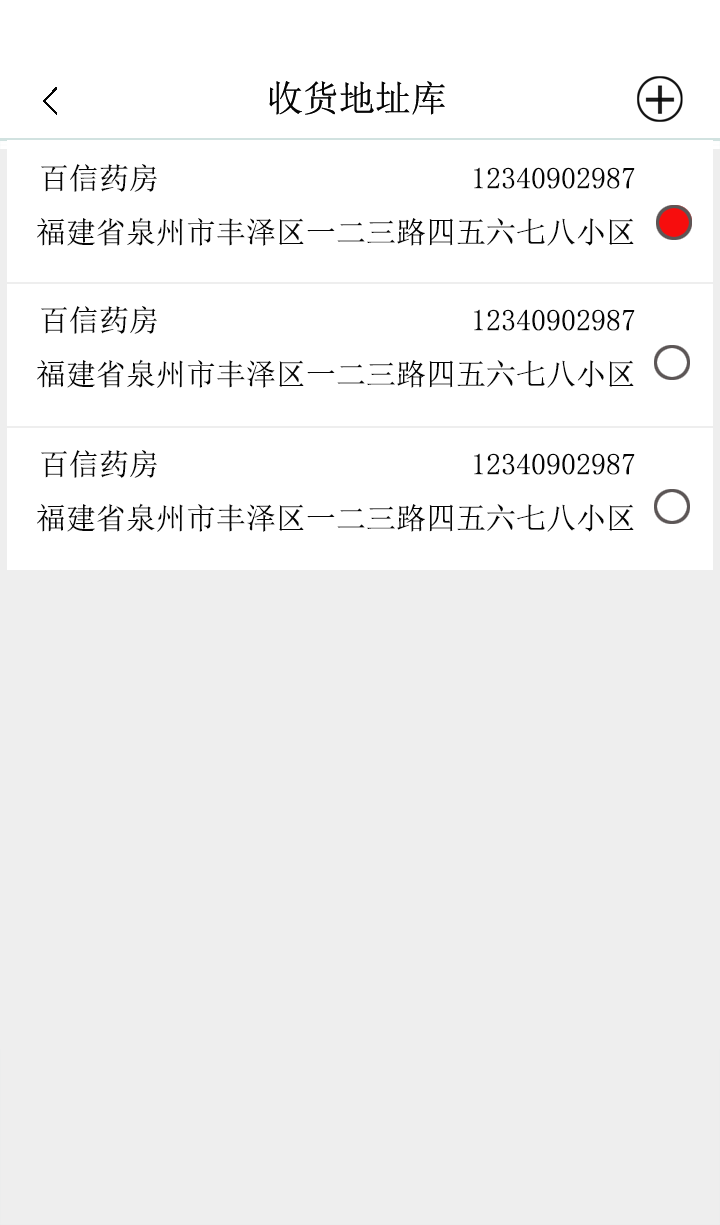
<style>
.page{position:relative;width:720px;height:1225px;background:#eeeeee}
.page>*{position:absolute;margin:0}
.t1{font:36px "SimSun";color:#060606}
.t2{font:30px "SimSun";color:#060606}
</style>
<div class="page">
<p class="t1" style="left:269px;top:81px;width:176px;height:34px">收货地址库</p>
<p class="t1" style="left:269px;top:81px;width:176px;height:34px">收货地址库</p>
<p class="t2" style="left:41px;top:164px;width:116px;height:28px">百信药房</p>
<p class="t2" style="left:474px;top:167px;width:161px;height:22px">12340902987</p>
<p class="t2" style="left:37px;top:217px;width:597px;height:29px">福建省泉州市丰泽区一二三路四五六七八小区</p>
<p class="t2" style="left:41px;top:306px;width:116px;height:28px">百信药房</p>
<p class="t2" style="left:474px;top:309px;width:161px;height:22px">12340902987</p>
<p class="t2" style="left:37px;top:359px;width:597px;height:29px">福建省泉州市丰泽区一二三路四五六七八小区</p>
<p class="t2" style="left:41px;top:450px;width:116px;height:28px">百信药房</p>
<p class="t2" style="left:474px;top:453px;width:161px;height:22px">12340902987</p>
<p class="t2" style="left:37px;top:503px;width:597px;height:29px">福建省泉州市丰泽区一二三路四五六七八小区</p>
</div>
